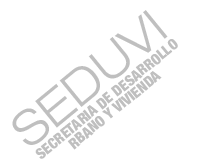
<style>
.page{position:relative;width:197px;height:164px;background:#ffffff}
.page>*{position:absolute;margin:0}
.t1{font:48px "HelveticaNeue-LightExt";color:#bfbfbf}
.t2{font:15px "HelveticaNeue-BlackCond";color:#bfbfbf}
.t3{font:14px "HelveticaNeue-BlackCond";color:#bfbfbf}
</style>
<div class="page">
<p class="t1" style="left:12px;top:10px;width:156px;height:135px;rotate:-39deg">SEDUVI</p>
<p class="t2" style="left:35px;top:39px;width:143px;height:120px;rotate:-39deg">SECRETARIA DE DESARROLLO</p>
<p class="t2" style="left:67px;top:71px;width:95px;height:79px;rotate:-39deg"><span class="t3"><br></span>RBANO Y VIVIENDA</p>
</div>
